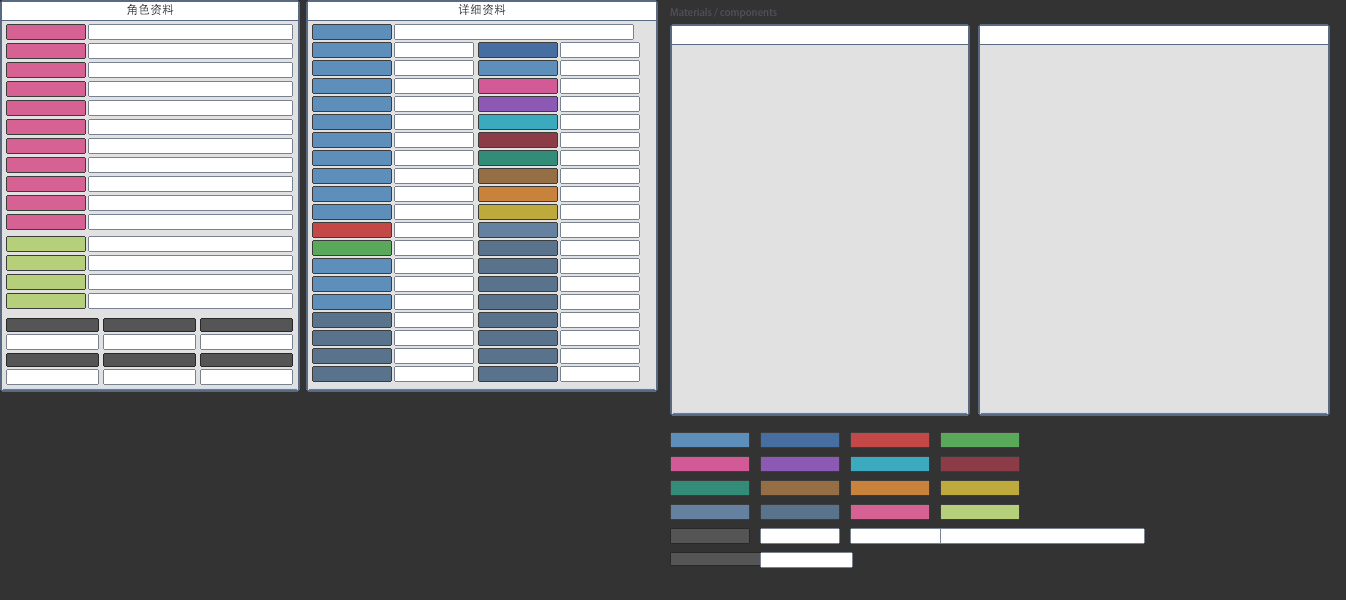
<style>
.page{position:relative;width:1346px;height:600px;background:#e1e1e1}
.page>*{position:absolute;margin:0}
.t1{font:12px "AdobeHeitiStd-Regular";color:#282828}
.t2{font:10px "AdobeHeitiStd-Regular";color:#50505a}
</style>
<div class="page">
<p class="t1" style="left:127px;top:3px;width:47px;height:12px">角色资料</p>
<p class="t1" style="left:458px;top:4px;width:48px;height:11px">详细资料</p>
<p class="t2" style="left:670px;top:8px;width:107px;height:11px">Materials / components</p>
</div>
